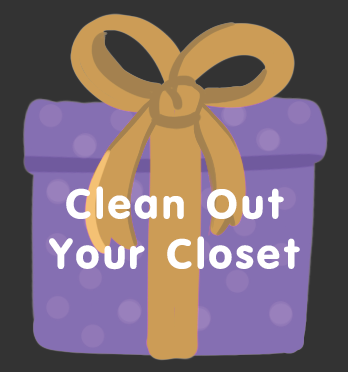
<style>
.page{position:relative;width:348px;height:372px;background:#333333}
.page>*{position:absolute;margin:0}
.t1{font:42.3px "NokiaSansS60-Bold";letter-spacing:0.08em;color:#ffffff}
</style>
<div class="page">
<p class="t1" style="left:49px;top:186px;width:251px;height:84px;text-align:center">Clean Out<br>Your Closet</p>
</div>
